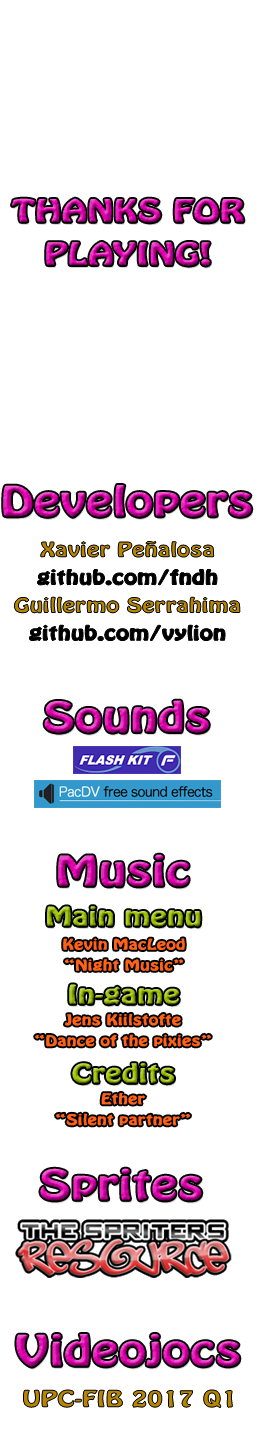
<style>
.page{position:relative;width:256px;height:1443px;background:#ffffff}
.page>*{position:absolute;margin:0}
.t1{font:27px "HoboStd";letter-spacing:0.02em;scale:1.33 1}
.t2{font:36.3px "HoboStd";letter-spacing:0.02em;scale:1.33 1}
.t3{font:22.8px "HoboStd";letter-spacing:0.02em;scale:1.33 1}
.t4{font:13px "HoboStd";letter-spacing:0.02em;color:#ff6317;scale:1.33 1}
</style>
<div class="page">
<p class="t1" style="left:12px;top:198px;width:232px;height:68px;text-align:center">THANKS FOR<br>PLAYING!</p>
<p class="t2" style="left:44px;top:700px;width:165px;height:33px">Sounds</p>
<p class="t2" style="left:58px;top:854px;width:131px;height:33px">Music</p>
<p class="t3" style="left:47px;top:906px;width:154px;height:21px">Main menu</p>
<p class="t4" style="left:63px;top:938px;width:122px;height:33px;text-align:center">Kevin MacLeod<br>“Night Music”</p>
<p class="t3" style="left:69px;top:984px;width:110px;height:21px">In-game</p>
<p class="t4" style="left:35px;top:1014px;width:176px;height:33px;text-align:center">Jens Kiilstofte<br>“Dance of the pixies”</p>
<p class="t3" style="left:72px;top:1063px;width:102px;height:21px">Credits</p>
<p class="t4" style="left:56px;top:1093px;width:134px;height:33px;text-align:center">Ether<br>“Silent partner”</p>
<p class="t2" style="left:40px;top:1168px;width:162px;height:33px">Sprites</p>
</div>
